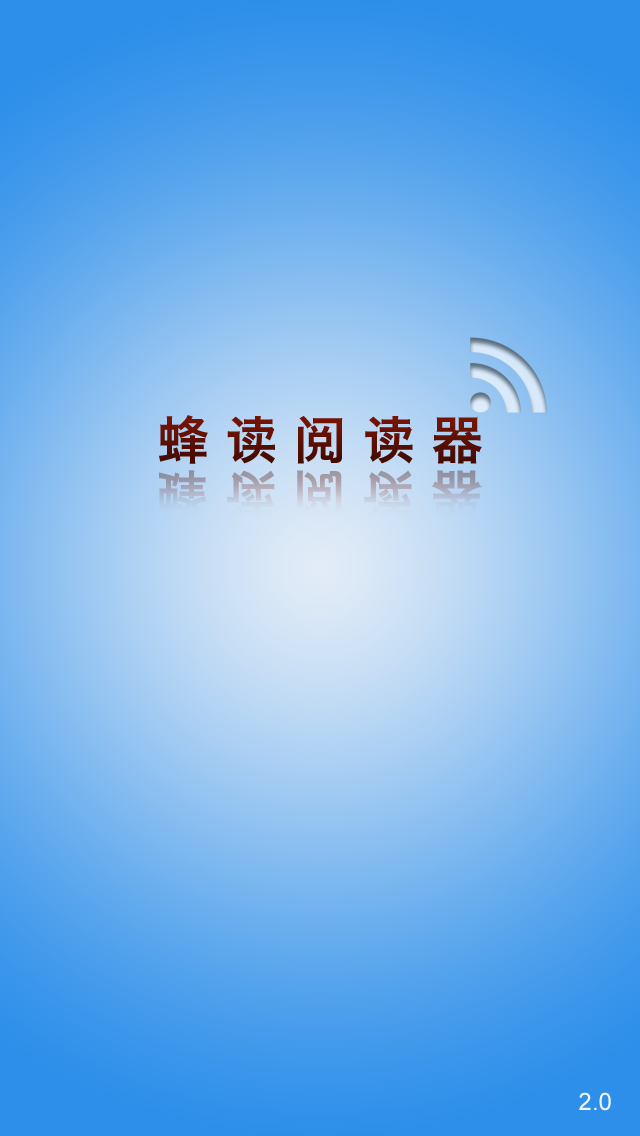
<style>
.page{position:relative;width:640px;height:1136px}
.page>*{position:absolute;margin:0}
.t1{font:51.5px "HiraginoSansGB-W6";color:#5e1003}
.t2{font:24px "ArialMT";color:#eef5fa}
</style>
<div class="page">
<p class="t1" style="left:159px;top:415px;width:323px;height:49px">蜂 读 阅 读 器</p>
<p class="t2" style="left:579px;top:1092px;width:32px;height:19px">2.0</p>
</div>
